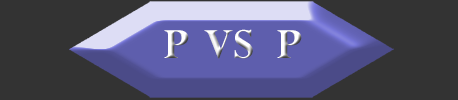
<style>
.page{position:relative;width:458px;height:100px;background:#333333}
.page>*{position:absolute;margin:0}
.t1{font:47.4px "Perpetua-Bold"}
</style>
<div class="page">
<p class="t1" style="left:164px;top:29px;width:138px;height:30px">P  VS  P</p>
</div>
